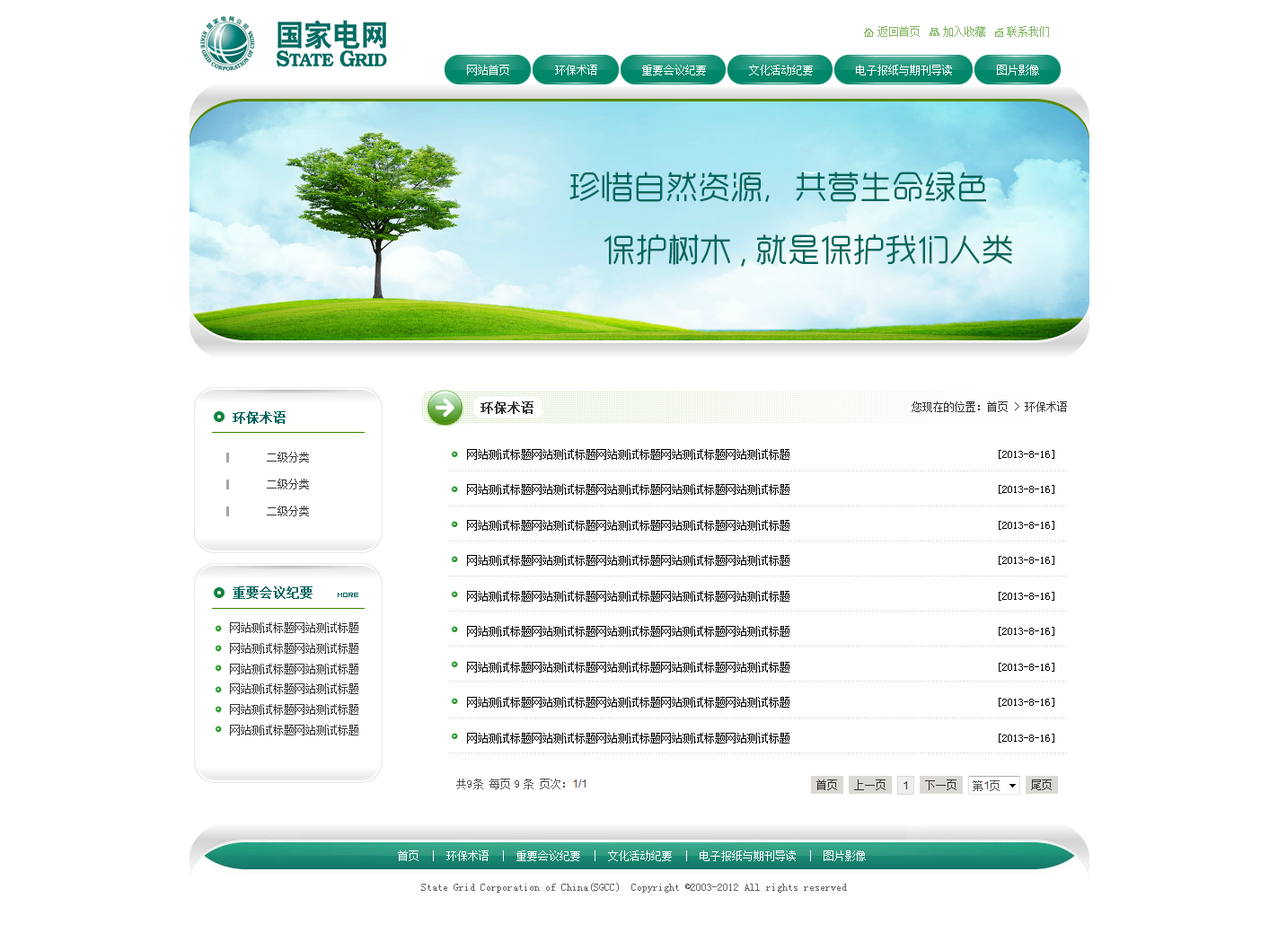
<style>
.page{position:relative;width:1278px;height:933px;background:#ffffff}
.page>*{position:absolute;margin:0}
.t1{font:10.8px "SimSun";color:#ffffff}
.t2{font:32.3px "RTWSYueGoTrial-Regular";color:#00675d}
.t3{font:12.6px "SimSun";color:#333333;font-weight:bold}
.t4{font:10.8px "SimSun";color:#333333}
.t5{font:12.6px "SimSun";color:#00645f;font-weight:bold}
.t6{font:10.8px/35.5px "SimSun";color:#000000}
.t7{font:10.8px/26.9px "SimSun";color:#333333}
.t8{font:7.2px "04b08";color:#00645f}
.t9{font:10.8px "SimSun";color:#505050}
.t10{font:10.8px "SimSun";color:#666666}
</style>
<div class="page">
<p class="t1" style="left:467px;top:65px;width:42px;height:10px">网站首页</p>
<p class="t1" style="left:555px;top:65px;width:42px;height:10px">环保术语</p>
<p class="t1" style="left:642px;top:65px;width:64px;height:10px">重要会议纪要</p>
<p class="t1" style="left:749px;top:65px;width:64px;height:10px">文化活动纪要</p>
<p class="t1" style="left:856px;top:65px;width:96px;height:10px">电子报纸与期刊导读</p>
<p class="t1" style="left:997px;top:65px;width:42px;height:10px">图片影像</p>
<p class="t2" style="left:569px;top:172px;width:417px;height:30px">珍惜自然资源，共营生命绿色</p>
<p class="t2" style="left:603px;top:234px;width:409px;height:33px">保护树木,就是保护我们人类</p>
<p class="t3" style="left:480px;top:401px;width:53px;height:13px">环保术语</p>
<p class="t4" style="left:912px;top:401px;width:155px;height:11px">您现在的位置：首页 &gt; 环保术语</p>
<p class="t5" style="left:233px;top:411px;width:53px;height:13px">环保术语</p>
<p class="t6" style="left:467px;top:449px;width:322px;height:295px">网站测试标题网站测试标题网站测试标题网站测试标题网站测试标题<br>网站测试标题网站测试标题网站测试标题网站测试标题网站测试标题<br>网站测试标题网站测试标题网站测试标题网站测试标题网站测试标题<br>网站测试标题网站测试标题网站测试标题网站测试标题网站测试标题<br>网站测试标题网站测试标题网站测试标题网站测试标题网站测试标题<br>网站测试标题网站测试标题网站测试标题网站测试标题网站测试标题<br>网站测试标题网站测试标题网站测试标题网站测试标题网站测试标题<br>网站测试标题网站测试标题网站测试标题网站测试标题网站测试标题<br>网站测试标题网站测试标题网站测试标题网站测试标题网站测试标题</p>
<p class="t6" style="left:999px;top:450px;width:55px;height:293px">[2013-8-16]<br>[2013-8-16]<br>[2013-8-16]<br>[2013-8-16]<br>[2013-8-16]<br>[2013-8-16]<br>[2013-8-16]<br>[2013-8-16]<br>[2013-8-16]</p>
<p class="t7" style="left:267px;top:452px;width:42px;height:64px">二级分类<br>二级分类<br>二级分类</p>
<p class="t5" style="left:233px;top:586px;width:80px;height:13px">重要会议纪要</p>
<p class="t8" style="left:338px;top:593px;width:20px;height:4px">more</p>
<p class="t9" style="left:467px;top:780px;width:4px;height:8px">9</p>
<p class="t9" style="left:515px;top:780px;width:4px;height:8px">9</p>
<p class="t1" style="left:398px;top:850px;width:468px;height:11px">首页  |  环保术语  |  重要会议纪要  |  文化活动纪要  |  电子报纸与期刊导读  |  图片影像</p>
<p class="t10" style="left:421px;top:883px;width:426px;height:10px">State Grid Corporation of China(SGCC)  Copyright ©2003-2012 All rights reserved</p>
</div>
